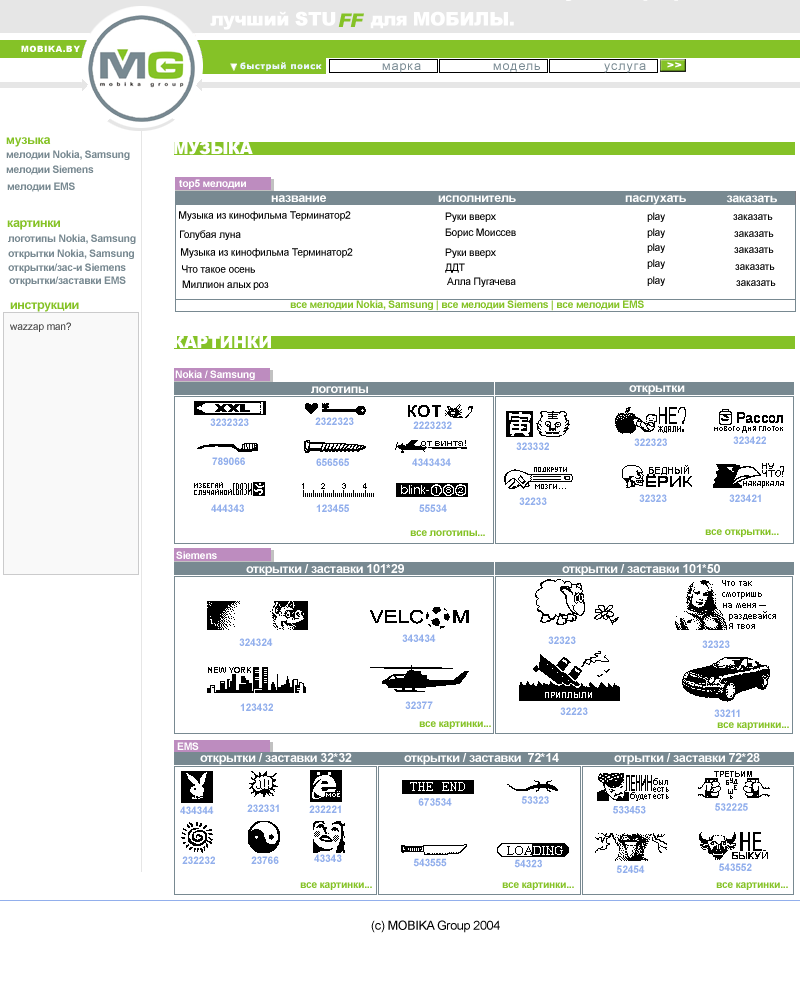
<style>
.page{position:relative;width:800px;height:1000px;background:#ffffff}
.page>*{position:absolute;margin:0}
.t1{font:18.8px "Arial-Black";letter-spacing:-0.025em;color:#ffffff}
.t2{font:18.8px "Arial-BlackItalic";letter-spacing:-0.025em;color:#85c227}
.t3{font:8.3px "Arial-Black";letter-spacing:0.075em;color:#ffffff}
.t4{font:8.3px "Verdana-Bold";letter-spacing:0.075em;color:#ebf7fe}
.t5{font:12.5px "ArialMT";letter-spacing:0.075em;color:#788992}
.t6{font:8.5px "Arial-Black";letter-spacing:0.075em;color:#ffffff;scale:1.23 1}
.t7{font:12.5px "Arial-BoldMT";letter-spacing:-0.025em;color:#85c226}
.t8{font:10.4px "Arial-BoldMT";letter-spacing:-0.025em;color:#788991}
.t9{font:16.7px "Arial-Black";letter-spacing:-0.025em;color:#ffffff}
.t10{font:10.4px "Arial-BoldMT";letter-spacing:-0.025em;color:#ffffff}
.t11{font:12.5px "Arial-BoldMT";letter-spacing:-0.025em;color:#ffffff}
.t12{font:10.4px "ArialMT";letter-spacing:-0.025em;color:#000000}
.t13{font:10.4px "Arial-BoldMT";letter-spacing:-0.025em;color:#85c226}
.t14{font:10.4px "ArialMT";letter-spacing:-0.025em;color:#494949}
.t15{font:10.4px "Arial-BoldMT";letter-spacing:-0.025em;color:#92afec}
.t16{font:12.5px "ArialMT";letter-spacing:-0.025em;color:#000000}
</style>
<div class="page">
<p class="t1" style="left:210px;top:11px;width:304px;height:19px">лучший STU      для МОБИЛЫ.</p>
<p class="t2" style="left:338px;top:13px;width:26px;height:14px">FF</p>
<p class="t3" style="left:21px;top:45px;width:59px;height:7px">MOBIKA.BY</p>
<p class="t4" style="left:240px;top:62px;width:82px;height:9px">быстрый поиск</p>
<p class="t5" style="left:493px;top:63px;width:47px;height:9px">модель</p>
<p class="t6" style="left:667px;top:62px;width:15px;height:6px">&gt;&gt;</p>
<p class="t7" style="left:6px;top:137px;width:45px;height:10px">музыка</p>
<p class="t8" style="left:6px;top:150px;width:124px;height:10px">мелодии Nokia, Samsung</p>
<p class="t9" style="left:174px;top:141px;width:79px;height:14px">МУЗЫКА</p>
<p class="t8" style="left:6px;top:165px;width:88px;height:10px">мелодии Siemens</p>
<p class="t8" style="left:7px;top:182px;width:68px;height:10px">мелодии EMS</p>
<p class="t10" style="left:179px;top:179px;width:67px;height:10px">top5 мелодии</p>
<p class="t11" style="left:271px;top:195px;width:55px;height:7px">название</p>
<p class="t11" style="left:438px;top:195px;width:78px;height:7px">исполнитель</p>
<p class="t11" style="left:625px;top:195px;width:61px;height:10px">паслухать</p>
<p class="t11" style="left:726px;top:195px;width:51px;height:8px">заказать</p>
<p class="t7" style="left:7px;top:220px;width:53px;height:10px">картинки</p>
<p class="t12" style="left:179px;top:211px;width:172px;height:10px">Музыка из кинофильма Терминатор2</p>
<p class="t12" style="left:445px;top:212px;width:51px;height:10px">Руки вверх</p>
<p class="t12" style="left:180px;top:230px;width:61px;height:10px">Голубая луна</p>
<p class="t12" style="left:445px;top:228px;width:71px;height:10px">Борис Моиссев</p>
<p class="t8" style="left:8px;top:234px;width:128px;height:10px">логотипы Nokia, Samsung</p>
<p class="t8" style="left:8px;top:249px;width:126px;height:10px">открытки Nokia, Samsung</p>
<p class="t12" style="left:181px;top:248px;width:172px;height:10px">Музыка из кинофильма Терминатор2</p>
<p class="t12" style="left:445px;top:248px;width:51px;height:10px">Руки вверх</p>
<p class="t8" style="left:8px;top:263px;width:118px;height:10px">открытки/зас-и Siemens</p>
<p class="t12" style="left:182px;top:265px;width:73px;height:8px">Что такое осень</p>
<p class="t12" style="left:445px;top:263px;width:20px;height:10px">ДДТ</p>
<p class="t8" style="left:9px;top:276px;width:117px;height:10px">открытки/заставки EMS</p>
<p class="t12" style="left:182px;top:280px;width:87px;height:10px">Миллион алых роз</p>
<p class="t12" style="left:447px;top:277px;width:69px;height:10px">Алла Пугачева</p>
<p class="t12" style="left:736px;top:280px;width:40px;height:6px">заказать</p>
<p class="t7" style="left:10px;top:302px;width:69px;height:10px">инструкции</p>
<p class="t13" style="left:290px;top:300px;width:354px;height:11px">все мелодии Nokia, Samsung | все мелодии Siemens | все мелодии EMS</p>
<p class="t14" style="left:10px;top:322px;width:61px;height:10px">wazzap man?</p>
<p class="t9" style="left:173px;top:335px;width:98px;height:13px">КАРТИНКИ</p>
<p class="t10" style="left:175px;top:370px;width:80px;height:10px">Nokia / Samsung</p>
<p class="t11" style="left:311px;top:386px;width:57px;height:7px">логотипы</p>
<p class="t11" style="left:629px;top:385px;width:56px;height:10px">открытки</p>
<p class="t15" style="left:210px;top:418px;width:39px;height:8px">3232323</p>
<p class="t15" style="left:315px;top:417px;width:39px;height:8px">2322323</p>
<p class="t15" style="left:413px;top:421px;width:39px;height:8px">2223232</p>
<p class="t15" style="left:634px;top:438px;width:33px;height:8px">322323</p>
<p class="t15" style="left:733px;top:436px;width:33px;height:8px">323422</p>
<p class="t15" style="left:516px;top:442px;width:33px;height:8px">323332</p>
<p class="t15" style="left:212px;top:457px;width:33px;height:8px">789066</p>
<p class="t15" style="left:316px;top:458px;width:33px;height:8px">656565</p>
<p class="t15" style="left:412px;top:458px;width:39px;height:8px">4343434</p>
<p class="t15" style="left:519px;top:497px;width:28px;height:8px">32233</p>
<p class="t15" style="left:639px;top:494px;width:28px;height:8px">32323</p>
<p class="t15" style="left:729px;top:494px;width:32px;height:8px">323421</p>
<p class="t15" style="left:211px;top:504px;width:33px;height:8px">444343</p>
<p class="t15" style="left:316px;top:504px;width:33px;height:8px">123455</p>
<p class="t15" style="left:419px;top:504px;width:28px;height:8px">55534</p>
<p class="t13" style="left:410px;top:530px;width:75px;height:6px">все логотипы...</p>
<p class="t13" style="left:705px;top:529px;width:74px;height:8px">все открытки...</p>
<p class="t10" style="left:176px;top:551px;width:41px;height:8px">Siemens</p>
<p class="t11" style="left:246px;top:564px;width:158px;height:12px">открытки / заставки 101*29</p>
<p class="t11" style="left:562px;top:564px;width:158px;height:12px">открытки / заставки 101*50</p>
<p class="t15" style="left:239px;top:638px;width:34px;height:8px">324324</p>
<p class="t15" style="left:402px;top:634px;width:34px;height:8px">343434</p>
<p class="t15" style="left:548px;top:636px;width:28px;height:8px">32323</p>
<p class="t15" style="left:702px;top:640px;width:28px;height:8px">32323</p>
<p class="t15" style="left:405px;top:701px;width:28px;height:8px">32377</p>
<p class="t15" style="left:240px;top:703px;width:33px;height:8px">123432</p>
<p class="t15" style="left:560px;top:707px;width:28px;height:8px">32223</p>
<p class="t15" style="left:714px;top:709px;width:26px;height:8px">33211</p>
<p class="t13" style="left:419px;top:721px;width:72px;height:8px">все картинки...</p>
<p class="t13" style="left:717px;top:722px;width:72px;height:8px">все картинки...</p>
<p class="t10" style="left:177px;top:742px;width:22px;height:8px">EMS</p>
<p class="t11" style="left:200px;top:753px;width:152px;height:12px">открытки / заставки 32*32</p>
<p class="t11" style="left:404px;top:753px;width:155px;height:12px">открытки / заставки  72*14</p>
<p class="t11" style="left:614px;top:753px;width:146px;height:12px">отрытки / заставки 72*28</p>
<p class="t15" style="left:418px;top:798px;width:34px;height:8px">673534</p>
<p class="t15" style="left:521px;top:796px;width:28px;height:8px">53323</p>
<p class="t15" style="left:180px;top:806px;width:34px;height:8px">434344</p>
<p class="t15" style="left:247px;top:804px;width:32px;height:8px">232331</p>
<p class="t15" style="left:309px;top:805px;width:32px;height:8px">232221</p>
<p class="t15" style="left:613px;top:806px;width:33px;height:8px">533453</p>
<p class="t15" style="left:715px;top:803px;width:33px;height:8px">532225</p>
<p class="t15" style="left:182px;top:856px;width:33px;height:8px">232232</p>
<p class="t15" style="left:251px;top:856px;width:28px;height:8px">23766</p>
<p class="t15" style="left:314px;top:854px;width:28px;height:8px">43343</p>
<p class="t15" style="left:413px;top:858px;width:34px;height:9px">543555</p>
<p class="t15" style="left:514px;top:859px;width:28px;height:9px">54323</p>
<p class="t15" style="left:616px;top:865px;width:29px;height:8px">52454</p>
<p class="t15" style="left:719px;top:863px;width:33px;height:8px">543552</p>
<p class="t13" style="left:300px;top:882px;width:72px;height:8px">все картинки...</p>
<p class="t13" style="left:502px;top:882px;width:72px;height:8px">все картинки...</p>
<p class="t13" style="left:716px;top:882px;width:72px;height:8px">все картинки...</p>
<p class="t16" style="left:371px;top:920px;width:129px;height:13px">(с) MOBIKA Group 2004</p>
</div>
